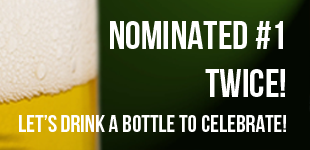
<style>
.page{position:relative;width:310px;height:150px}
.page>*{position:absolute;margin:0}
.t1{font:40px "BebasNeue";color:#ffffff;text-transform:uppercase}
.t2{font:24px "BebasNeue";color:#ffffff;text-transform:uppercase}
</style>
<div class="page">
<p class="t1" style="left:110px;top:21px;width:175px;height:76px;text-align:right">nominated #1<br>twice!</p>
<p class="t2" style="left:19px;top:115px;width:267px;height:17px">let’s drink a bottle to celebrate!</p>
</div>
